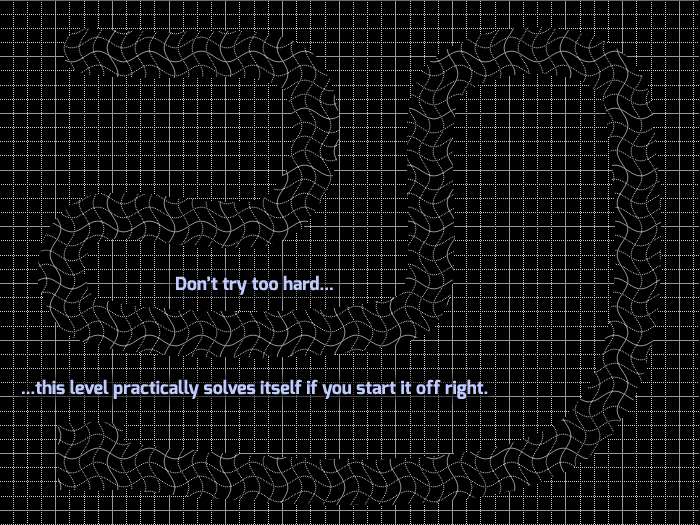
<style>
.page{position:relative;width:700px;height:525px;background:#000000}
.page>*{position:absolute;margin:0}
.t1{font:18px "Exo-Bold";color:#bfcbff}
</style>
<div class="page">
<p class="t1" style="left:176px;top:275px;width:157px;height:20px">Don’t try too hard...</p>
<p class="t1" style="left:22px;top:379px;width:466px;height:20px">...this level practically solves itself if you start it off right.</p>
</div>
